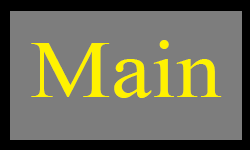
<style>
.page{position:relative;width:250px;height:150px;background:#7d7d7d}
.page>*{position:absolute;margin:0}
.t1{font:82px "TimesNewRomanPSMT";color:#fff200;scale:1.1 1}
</style>
<div class="page">
<p class="t1" style="left:31px;top:40px;width:191px;height:58px">Main</p>
</div>
